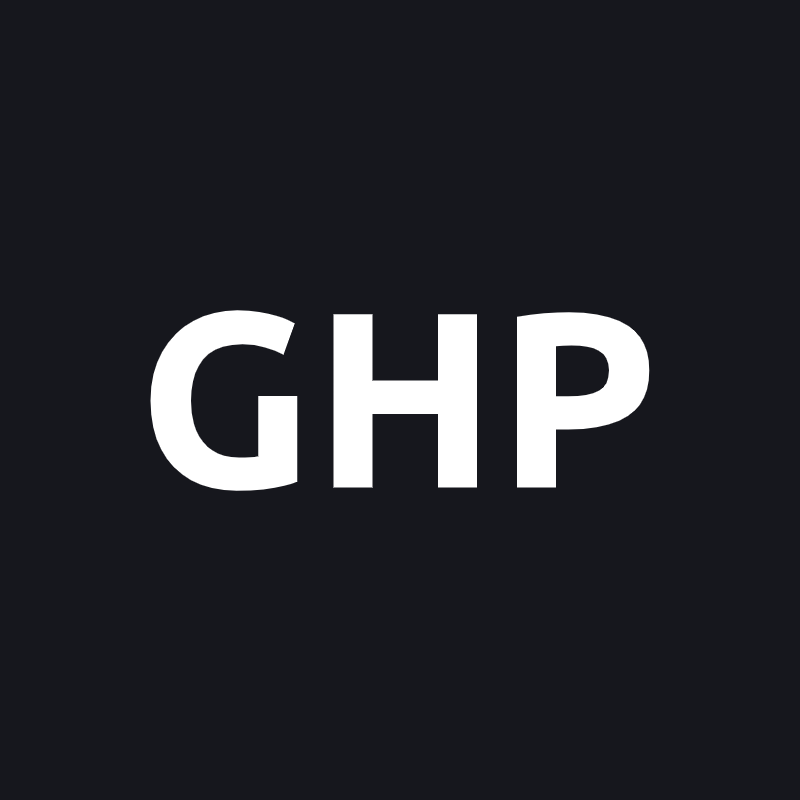
<style>
.page{position:relative;width:800px;height:800px;background:#16171d}
.page>*{position:absolute;margin:0}
.t1{font:250px "Ubuntu-Bold";color:#ffffff}
</style>
<div class="page">
<p class="t1" style="left:150px;top:310px;width:500px;height:181px">GHP</p>
</div>
